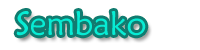
<style>
.page{position:relative;width:200px;height:50px;background:#ffffff}
.page>*{position:absolute;margin:0}
.t1{font:33.3px "MaiandraGD-Regular";color:#07ecd4}
</style>
<div class="page">
<p class="t1" style="left:16px;top:11px;width:130px;height:25px">Sembako</p>
</div>
